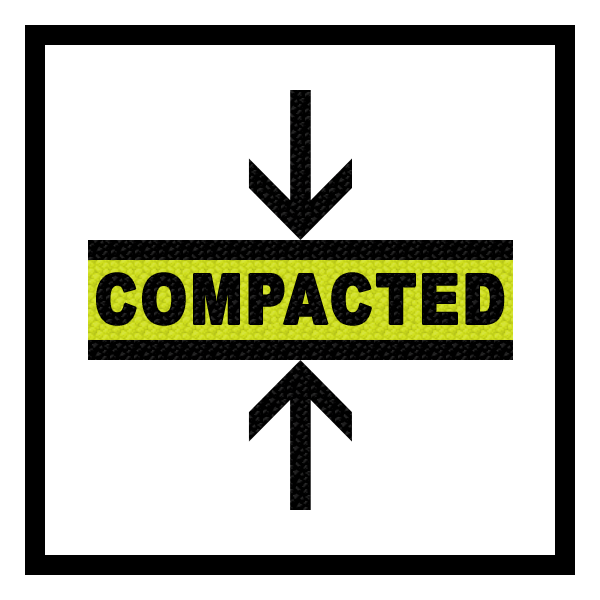
<style>
.page{position:relative;width:600px;height:600px;background:#ffffff}
.page>*{position:absolute;margin:0}
.t1{font:70px "Arial-Black";letter-spacing:0.05em;color:#000000;scale:0.8 1}
</style>
<div class="page">
<p class="t1" style="left:97px;top:273px;width:407px;height:52px">COMPACTED</p>
</div>
